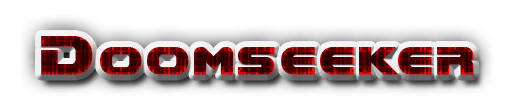
<style>
.page{position:relative;width:515px;height:111px;background:#ffffff}
.page>*{position:absolute;margin:0}
.t1{font:48px "DooM";letter-spacing:0.05em;font-weight:bold}
</style>
<div class="page">
<p class="t1" style="left:41px;top:36px;width:433px;height:39px">Doomseeker</p>
</div>
